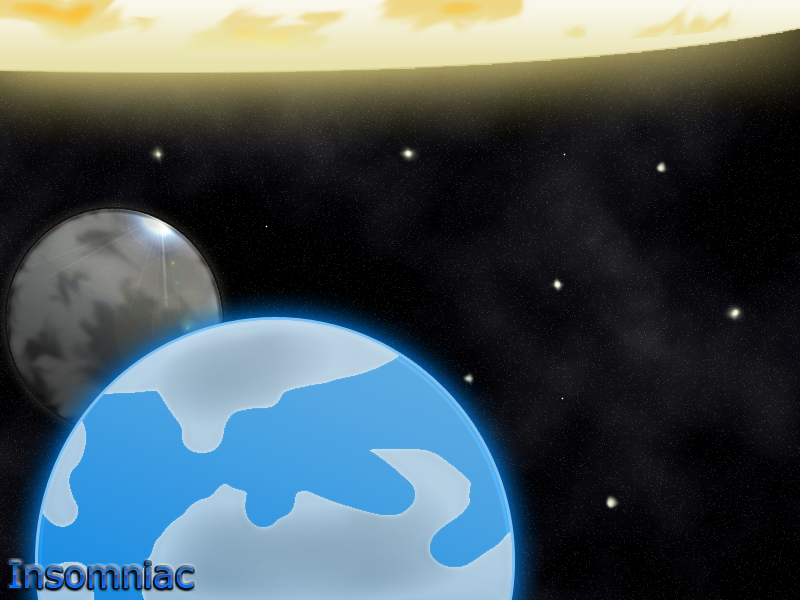
<style>
.page{position:relative;width:800px;height:600px}
.page>*{position:absolute;margin:0}
.t1{font:36px "Verdana"}
</style>
<div class="page">
<p class="t1" style="left:9px;top:562px;width:184px;height:26px">Insomniac</p>
</div>
